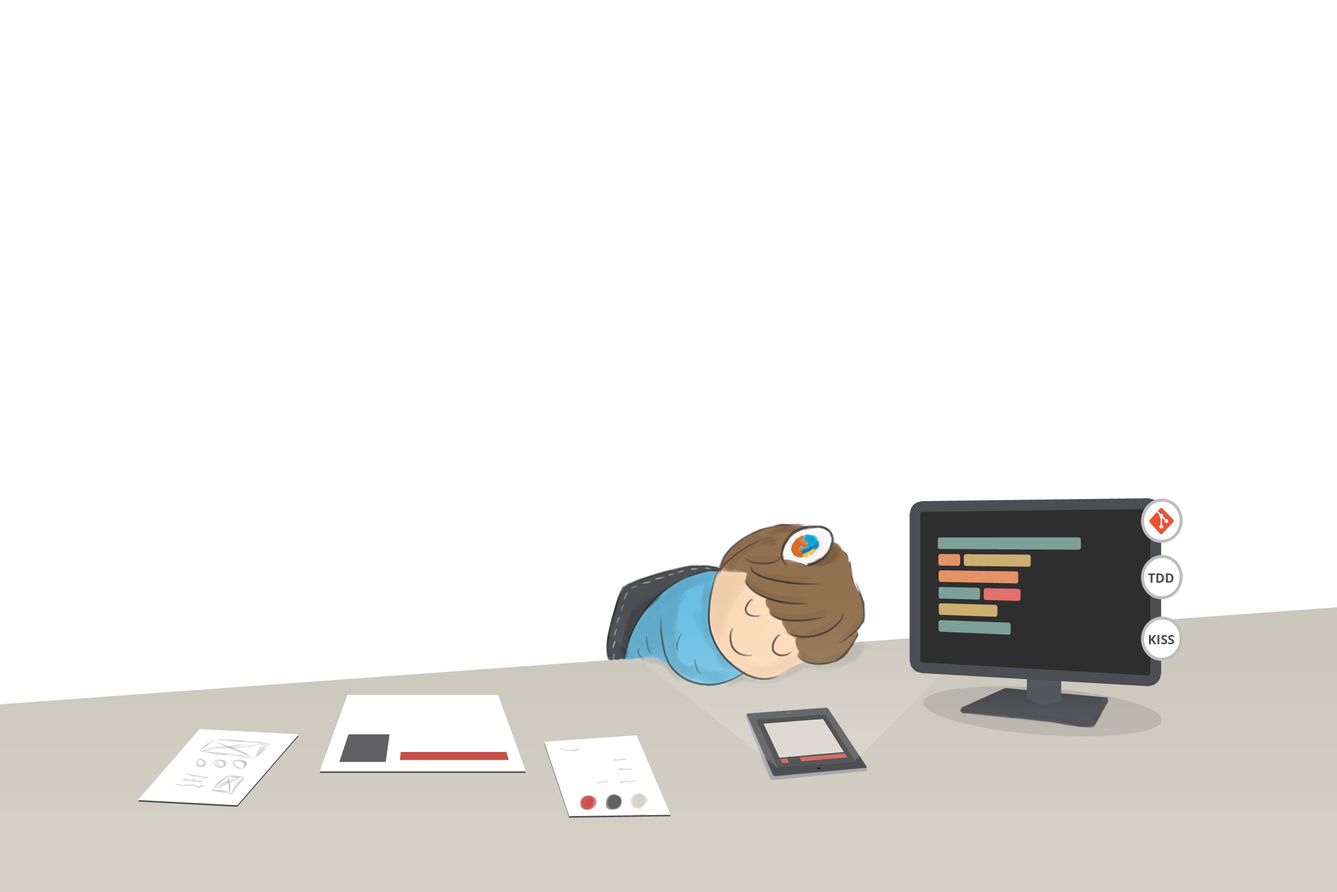
<style>
.page{position:relative;width:1337px;height:892px;background:#ffffff}
.page>*{position:absolute;margin:0}
.t1{font:12.8px "OpenSans-Bold";color:#4d4e53}
</style>
<div class="page">
<p class="t1" style="left:1148px;top:573px;width:26px;height:9px">TDD</p>
<p class="t1" style="left:1149px;top:635px;width:26px;height:9px">KISS</p>
</div>
